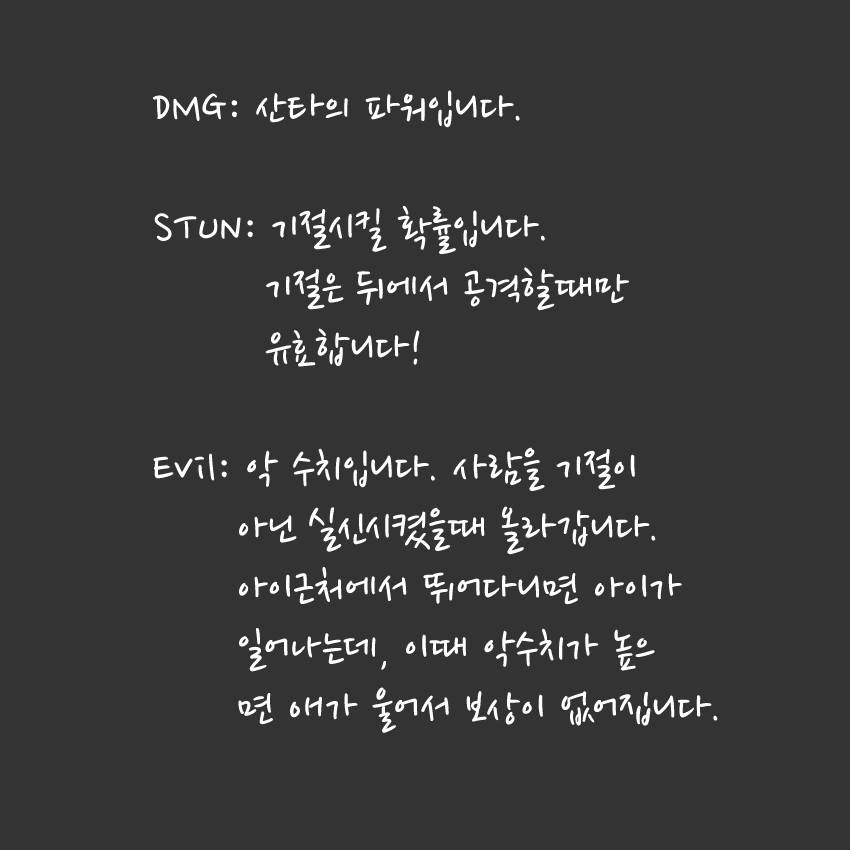
<style>
.page{position:relative;width:850px;height:850px;background:#333333}
.page>*{position:absolute;margin:0}
.t1{font:50px "NanumPen";color:#ffffff}
</style>
<div class="page">
<p class="t1" style="left:153px;top:90px;width:565px;height:643px">DMG: 산타의 파워입니다.<br><br>STUN: 기절시킬 확률입니다. <br>        기절은 뒤에서 공격할때만   <br>        유효합니다!<br><br>Evil: 악 수치입니다. 사람을 기절이 <br>      아닌 실신시켰을때 올라갑니다.<br>      아이근처에서 뛰어다니면 아이가<br>      일어나는데, 이때 악수치가 높으<br>      면 애가 울어서 보상이 없어집니다.</p>
</div>
